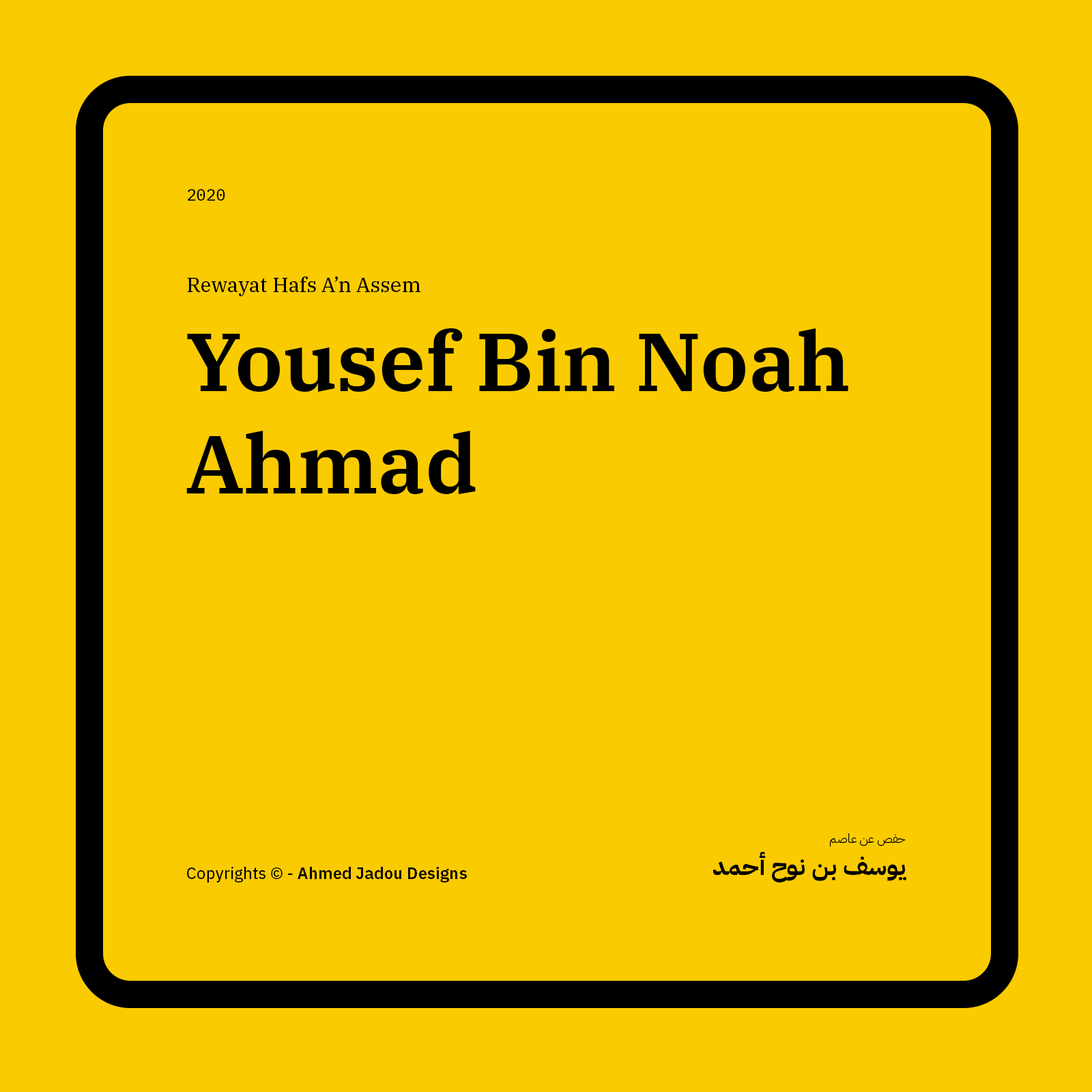
<style>
.page{position:relative;width:1092px;height:1092px;background:#facb00}
.page>*{position:absolute;margin:0}
.t1{font:16.4px "IBMPlexMono-Text";color:#000000}
.t2{font:20.5px "IBMPlexSerif-Text";color:#000000}
.t3{font:81.9px/102.7px "IBMPlexSerif-SemiBold";color:#000000}
.t4{font:12.3px "IBMPlexArabic-Light";color:#000000}
.t5{font:24.6px "IBMPlexArabic-Bold";color:#000000}
.t6{font:16.4px "IBMPlexSans-SemiBold";color:#000000}
.t7{font:16.4px "IBMPlexSans-Text";color:#000000}
</style>
<div class="page">
<p class="t1" style="left:188px;top:189px;width:37px;height:12px">2020</p>
<p class="t2" style="left:187px;top:276px;width:233px;height:20px">Rewayat Hafs A’n Assem</p>
<p class="t3" style="left:186px;top:328px;width:662px;height:166px">Yousef Bin Noah Ahmad</p>
<p class="t4" style="left:830px;top:833px;width:76px;height:14px">حفص عن عاصم</p>
<p class="t5" style="left:713px;top:852px;width:193px;height:30px">يوسف بن نوح أحمد</p>
<p class="t6" style="left:187px;top:867px;width:280px;height:15px"><span class="t7">Copyrights © - </span>Ahmed Jadou Designs</p>
</div>
